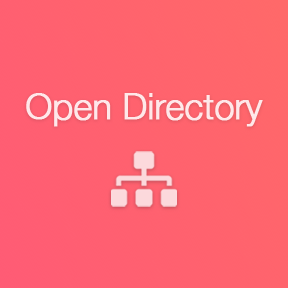
<style>
.page{position:relative;width:288px;height:288px}
.page>*{position:absolute;margin:0}
.t1{font:36px "HelveticaNeue-Light";letter-spacing:-0.02em;color:#ffffff;font-weight:bold}
</style>
<div class="page">
<p class="t1" style="left:26px;top:93px;width:237px;height:34px">Open Directory</p>
</div>
